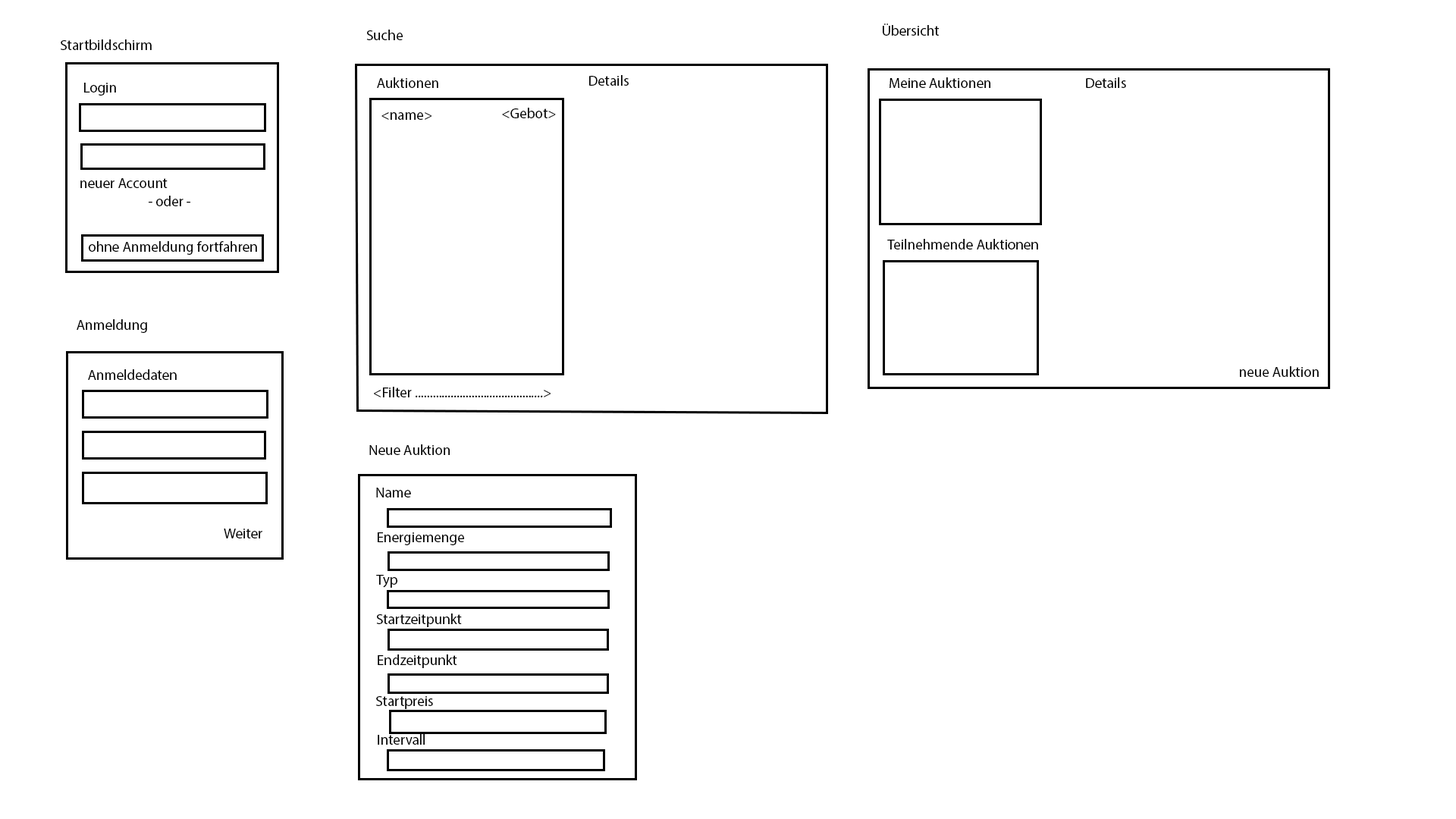
<style>
.page{position:relative;width:1456px;height:819px;background:#ffffff}
.page>*{position:absolute;margin:0}
.t1{font:14.4px "MyriadPro-Regular";color:#000000}
</style>
<div class="page">
<p class="t1" style="left:366px;top:30px;width:37px;height:10px">Suche</p>
<p class="t1" style="left:883px;top:24px;width:56px;height:12px">Übersicht</p>
<p class="t1" style="left:61px;top:39px;width:91px;height:11px">Startbildschirm</p>
<p class="t1" style="left:377px;top:77px;width:61px;height:11px">Auktionen</p>
<p class="t1" style="left:589px;top:75px;width:40px;height:11px">Details</p>
<p class="t1" style="left:890px;top:77px;width:100px;height:11px">Meine Auktionen</p>
<p class="t1" style="left:1086px;top:77px;width:40px;height:11px">Details</p>
<p class="t1" style="left:84px;top:83px;width:32px;height:13px">Login</p>
<p class="t1" style="left:381px;top:112px;width:50px;height:8px">&lt;name&gt;</p>
<p class="t1" style="left:502px;top:108px;width:54px;height:10px">&lt;Gebot&gt;</p>
<p class="t1" style="left:80px;top:178px;width:88px;height:10px">neuer Account</p>
<p class="t1" style="left:149px;top:196px;width:41px;height:10px">- oder -</p>
<p class="t1" style="left:89px;top:241px;width:168px;height:14px">ohne Anmeldung fortfahren</p>
<p class="t1" style="left:887px;top:239px;width:151px;height:10px">Teilnehmende Auktionen</p>
<p class="t1" style="left:77px;top:319px;width:70px;height:14px">Anmeldung</p>
<p class="t1" style="left:88px;top:369px;width:89px;height:11px">Anmeldedaten</p>
<p class="t1" style="left:1240px;top:366px;width:79px;height:11px">neue Auktion</p>
<p class="t1" style="left:374px;top:387px;width:177px;height:10px">&lt;Filter ...........................................&gt;</p>
<p class="t1" style="left:369px;top:444px;width:81px;height:11px">Neue Auktion</p>
<p class="t1" style="left:376px;top:488px;width:35px;height:9px">Name</p>
<p class="t1" style="left:224px;top:529px;width:38px;height:9px">Weiter</p>
<p class="t1" style="left:378px;top:532px;width:86px;height:13px">Energiemenge</p>
<p class="t1" style="left:376px;top:575px;width:21px;height:13px">Typ</p>
<p class="t1" style="left:376px;top:613px;width:86px;height:14px">Startzeitpunkt</p>
<p class="t1" style="left:378px;top:654px;width:79px;height:14px">Endzeitpunkt</p>
<p class="t1" style="left:376px;top:696px;width:57px;height:13px">Startpreis</p>
<p class="t1" style="left:378px;top:734px;width:47px;height:11px">Intervall</p>
</div>
